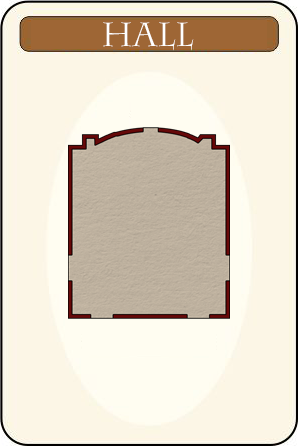
<style>
.page{position:relative;width:298px;height:446px;background:#fcf6e6}
.page>*{position:absolute;margin:0}
.t1{font:33.3px "CharlemagneStd-Regular";color:#ffffff}
</style>
<div class="page">
<p class="t1" style="left:103px;top:22px;width:91px;height:29px">HAll</p>
</div>
